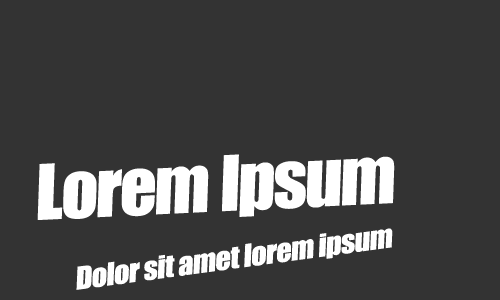
<style>
.page{position:relative;width:500px;height:300px;background:#333333}
.page>*{position:absolute;margin:0}
.t1{font:70.7px "Impact";letter-spacing:-0.02em;color:#ffffff}
.t2{font:29.1px "Impact";letter-spacing:-0.02em;color:#ffffff;scale:1.04 1}
</style>
<div class="page">
<p class="t1" style="left:37px;top:154px;width:358px;height:66px;rotate:-3deg">Lorem Ipsum</p>
<p class="t2" style="left:76px;top:228px;width:317px;height:62px;rotate:-8deg">Dolor sit amet lorem ipsum</p>
</div>
